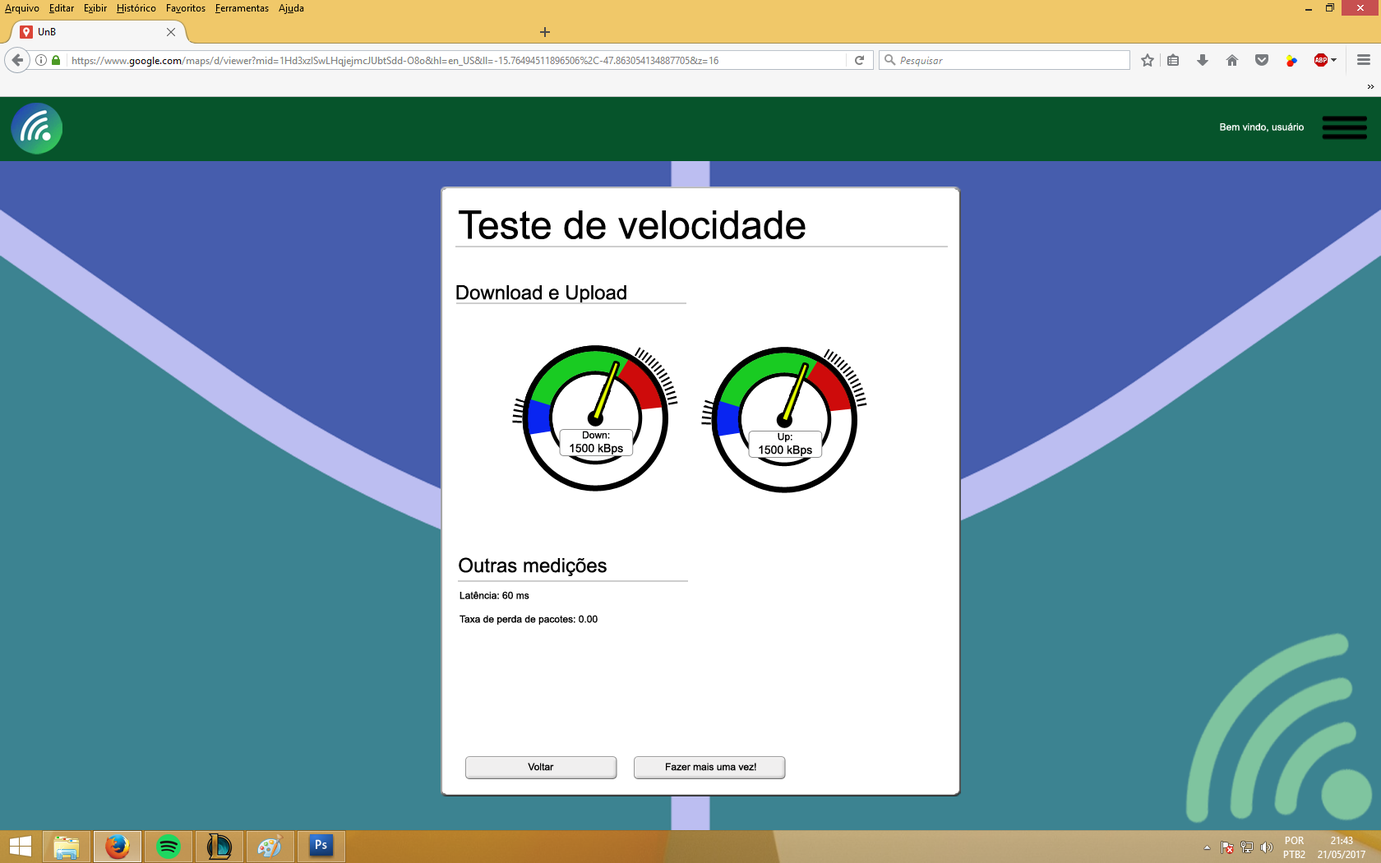
<style>
.page{position:relative;width:1381px;height:863px;background:#3c8391}
.page>*{position:absolute;margin:0}
.t1{font:9.9px "ArialMT";color:#ffffff}
.t2{font:39.5px "ArialMT";color:#000000}
.t3{font:19.7px "ArialMT";color:#000000}
.t4{font:11.5px "ArialMT";color:#010000}
.t5{font:9.9px "ArialMT";color:#010000}
.t6{font:9.9px "ArialMT";color:#000000}
</style>
<div class="page">
<p class="t1" style="left:1220px;top:123px;width:84px;height:9px">Bem vindo, usuário</p>
<p class="t2" style="left:459px;top:210px;width:347px;height:29px">Teste de velocidade</p>
<p class="t3" style="left:456px;top:285px;width:171px;height:18px">Download e Upload</p>
<p class="t4" style="left:570px;top:431px;width:53px;height:24px;text-align:center"><span class="t5">Down:<br></span>1500 kBps</p>
<p class="t4" style="left:759px;top:432px;width:53px;height:24px;text-align:center"><span class="t5">Up:<br></span>1500 kBps</p>
<p class="t3" style="left:459px;top:557px;width:148px;height:19px">Outras medições</p>
<p class="t6" style="left:460px;top:591px;width:138px;height:34px">Latência: 60 ms<br><br>Taxa de perda de pacotes: 0.00</p>
<p class="t6" style="left:528px;top:763px;width:26px;height:8px">Voltar</p>
<p class="t6" style="left:666px;top:763px;width:90px;height:8px">Fazer mais uma vez!</p>
</div>
